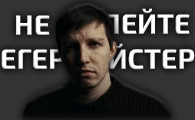
<style>
.page{position:relative;width:195px;height:120px}
.page>*{position:absolute;margin:0}
.t1{font:28.2px "Exo2-Bold";color:#ffffff}
.t2{font:28.2px "Exo2-Bold"}
</style>
<div class="page">
<p class="t1" style="left:16px;top:15px;width:34px;height:20px">НЕ</p>
<p class="t1" style="left:103px;top:8px;width:87px;height:26px">ПЕЙТЕ</p>
<p class="t2" style="left:1px;top:43px;width:194px;height:27px">ЕГЕРМЕЙСТЕР</p>
</div>
